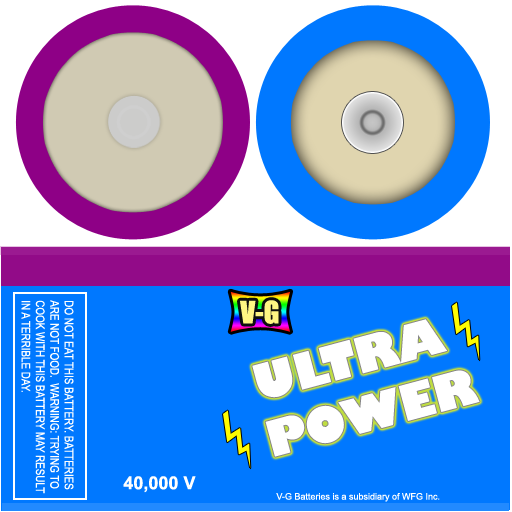
<style>
.page{position:relative;width:512px;height:512px;background:#0078ff}
.page>*{position:absolute;margin:0}
.t1{font:12px "ArialNarrow";color:#ffffff}
.t2{font:28.7px "Impact";color:#fff583}
.t3{font:48px "GillSans-UltraBold";color:#ffffff}
.t4{font:18px "Arial-BoldMT";color:#ffffff}
.t5{font:9px "ArialMT";color:#ffffff}
</style>
<div class="page">
<p class="t1" style="left:21px;top:300px;width:53px;height:194px;rotate:90deg">DO NOT EAT THIS BATTERY. BATTERIES <br>ARE NOT FOOD.  WARNING: TRYING TO <br>COOK WITH THIS BATTERY MAY RESULT <br>IN A TERRIBLE DAY.</p>
<p class="t2" style="left:240px;top:300px;width:39px;height:24px">V-G</p>
<p class="t3" style="left:252px;top:319px;width:228px;height:138px;text-align:center;rotate:-15deg">ULTRA <br>POWER</p>
<p class="t4" style="left:123px;top:476px;width:73px;height:17px">40,000 V</p>
<p class="t5" style="left:276px;top:493px;width:164px;height:9px">V-G Batteries is a subsidiary of WFG Inc.</p>
</div>
